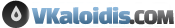
<style>
.page{position:relative;width:175px;height:28px;background:#ffffff}
.page>*{position:absolute;margin:0}
.t1{font:25px "ChangaOne";letter-spacing:-0.05em}
.t2{font:22px "ChangaOne";letter-spacing:-0.05em;color:#4d4d4f}
</style>
<div class="page">
<p class="t1" style="left:31px;top:6px;width:100px;height:19px">VKaloidis</p>
<p class="t2" style="left:129px;top:10px;width:45px;height:15px">.COM</p>
</div>
